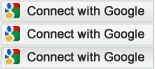
<style>
.page{position:relative;width:155px;height:69px}
.page>*{position:absolute;margin:0}
.t1{font:12px "ArialMT";color:#272727;font-weight:bold}
</style>
<div class="page">
<p class="t1" style="left:27px;top:6px;width:118px;height:12px">Connect with Google</p>
<p class="t1" style="left:27px;top:29px;width:118px;height:12px">Connect with Google</p>
<p class="t1" style="left:27px;top:52px;width:118px;height:12px">Connect with Google</p>
</div>
